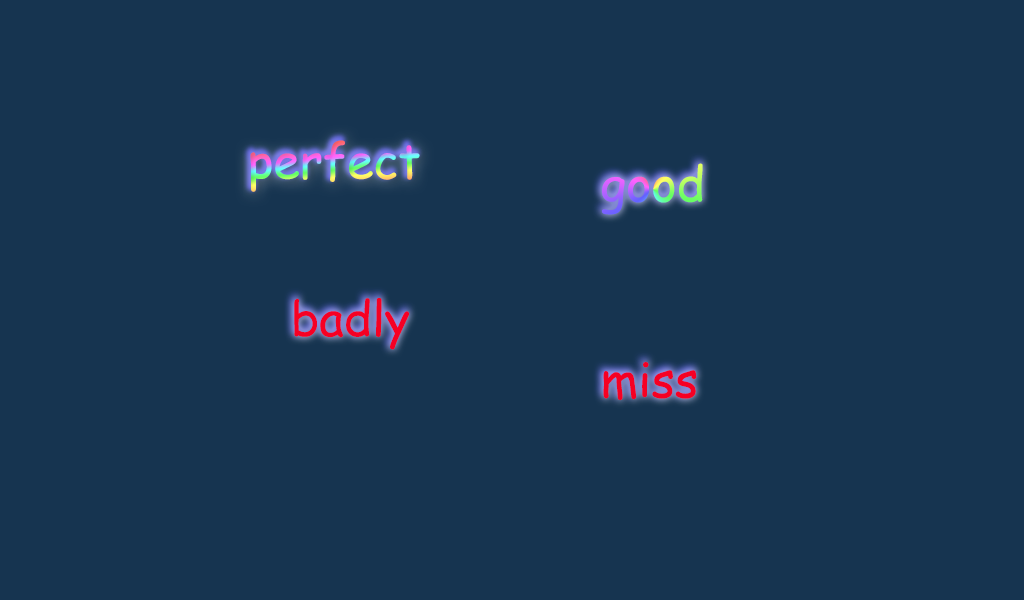
<style>
.page{position:relative;width:1024px;height:600px;background:#163450}
.page>*{position:absolute;margin:0}
.t1{font:48px "ComicSansMS"}
.t2{font:48px "ComicSansMS";color:#f60023}
</style>
<div class="page">
<p class="t1" style="left:250px;top:140px;width:170px;height:52px">perfect</p>
<p class="t1" style="left:602px;top:163px;width:101px;height:52px">good</p>
<p class="t2" style="left:294px;top:298px;width:116px;height:52px">badly</p>
<p class="t2" style="left:603px;top:361px;width:94px;height:40px">miss</p>
</div>
